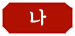
<style>
.page{position:relative;width:75px;height:36px;background:#b01000}
.page>*{position:absolute;margin:0}
.t1{font:18.7px "SDKukdetopokki-aLt";letter-spacing:-0.02em;color:#ffffff}
</style>
<div class="page">
<p class="t1" style="left:30px;top:9px;width:17px;height:17px">나</p>
</div>
